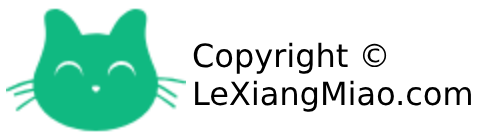
<style>
.page{position:relative;width:480px;height:140px;background:#ffffff}
.page>*{position:absolute;margin:0}
.t1{font:32px "DejaVuSans";color:#000000}
</style>
<div class="page">
<p class="t1" style="left:193px;top:42px;width:278px;height:70px">Copyright ©<br>LeXiangMiao.com</p>
</div>
